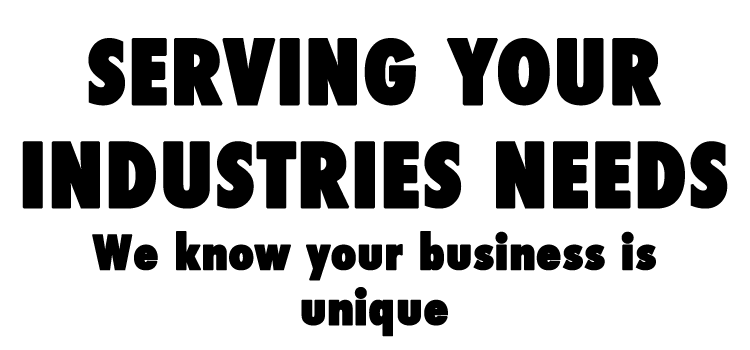
<style>
.page{position:relative;width:750px;height:350px;background:#ffffff}
.page>*{position:absolute;margin:0}
.t1{font:86px "Futura-CondensedExtraBold";color:#000000;font-weight:bold}
.t2{font:46px "Futura-CondensedExtraBold";color:#000000;font-weight:bold}
</style>
<div class="page">
<p class="t1" style="left:22px;top:38px;width:706px;height:171px;text-align:center">SERVING YOUR<br>INDUSTRIES NEEDS</p>
<p class="t2" style="left:92px;top:231px;width:564px;height:106px;text-align:center">We know your business is unique</p>
</div>
